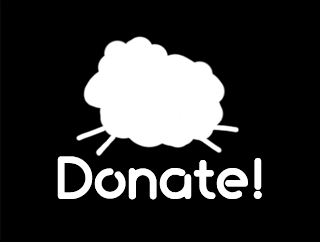
<style>
.page{position:relative;width:320px;height:242px;background:#000000}
.page>*{position:absolute;margin:0}
.t1{font:74.2px "SoulSaekdongBlack_M";color:#ffffff}
</style>
<div class="page">
<p class="t1" style="left:57px;top:156px;width:205px;height:44px">Donate!</p>
</div>
